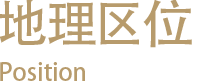
<style>
.page{position:relative;width:215px;height:81px;background:#ffffff}
.page>*{position:absolute;margin:0}
.t1{font:52px "AdobeHeitiStd-Regular";color:#b79b6c}
.t2{font:24px "AdobeHeitiStd-Regular";color:#b79b6c}
</style>
<div class="page">
<p class="t1" style="left:0px;top:0px;width:192px;height:48px">地理区位</p>
<p class="t2" style="left:0px;top:62px;width:85px;height:19px">Position</p>
</div>
